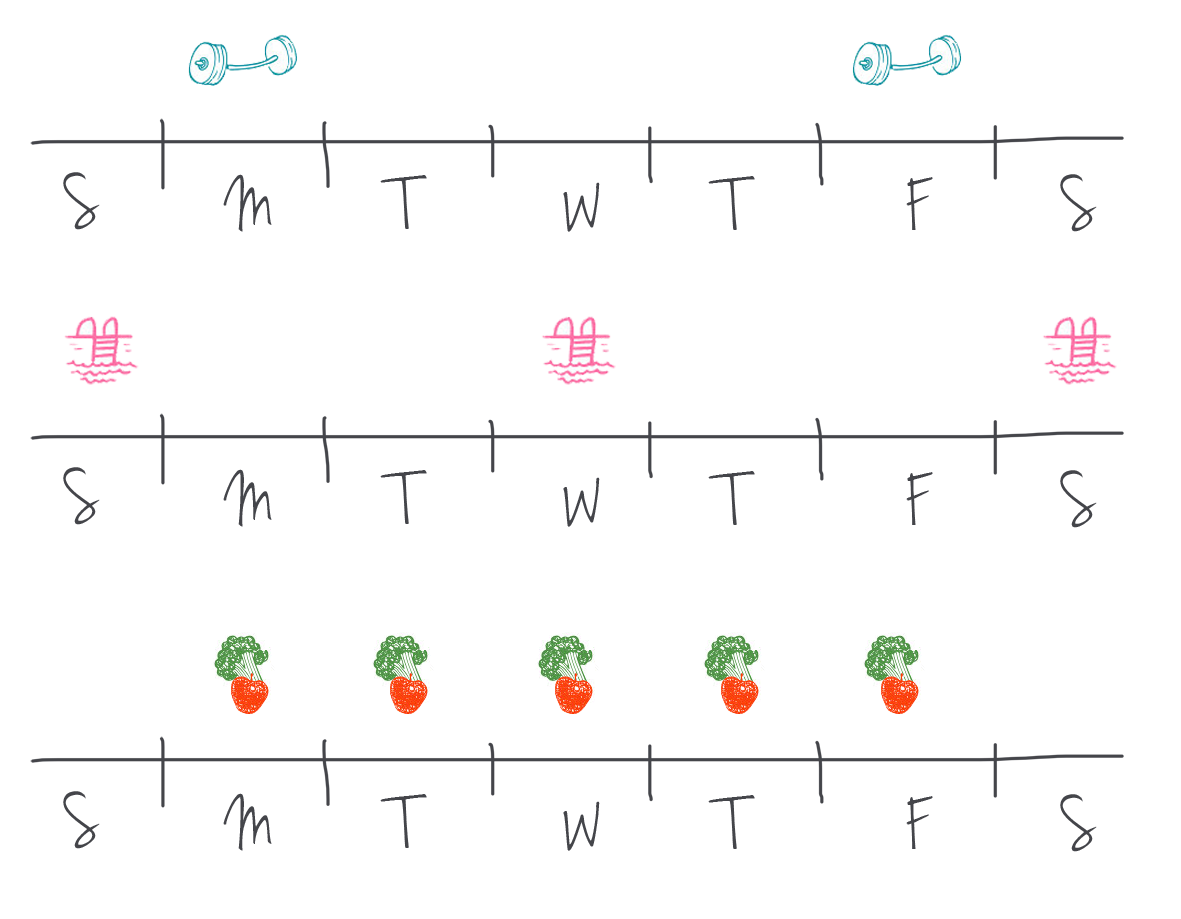
<style>
.page{position:relative;width:1181px;height:919px;background:#ffffff}
.page>*{position:absolute;margin:0}
.t1{font:76.9px "JennaSue";color:#44454a}
</style>
<div class="page">
<p class="t1" style="left:63px;top:172px;width:37px;height:58px">S</p>
<p class="t1" style="left:223px;top:174px;width:49px;height:58px">M</p>
<p class="t1" style="left:1060px;top:174px;width:37px;height:58px">S</p>
<p class="t1" style="left:380px;top:175px;width:47px;height:54px">T</p>
<p class="t1" style="left:563px;top:182px;width:37px;height:50px">W</p>
<p class="t1" style="left:708px;top:176px;width:47px;height:54px">T</p>
<p class="t1" style="left:906px;top:177px;width:27px;height:53px">F</p>
<p class="t1" style="left:63px;top:467px;width:37px;height:58px">S</p>
<p class="t1" style="left:223px;top:469px;width:49px;height:58px">M</p>
<p class="t1" style="left:380px;top:470px;width:47px;height:54px">T</p>
<p class="t1" style="left:708px;top:471px;width:47px;height:54px">T</p>
<p class="t1" style="left:906px;top:472px;width:27px;height:53px">F</p>
<p class="t1" style="left:1060px;top:470px;width:37px;height:58px">S</p>
<p class="t1" style="left:563px;top:477px;width:37px;height:50px">W</p>
<p class="t1" style="left:63px;top:791px;width:37px;height:58px">S</p>
<p class="t1" style="left:223px;top:793px;width:49px;height:58px">M</p>
<p class="t1" style="left:380px;top:794px;width:47px;height:54px">T</p>
<p class="t1" style="left:708px;top:795px;width:47px;height:54px">T</p>
<p class="t1" style="left:906px;top:796px;width:27px;height:53px">F</p>
<p class="t1" style="left:1060px;top:794px;width:37px;height:58px">S</p>
<p class="t1" style="left:563px;top:801px;width:37px;height:50px">W</p>
</div>
